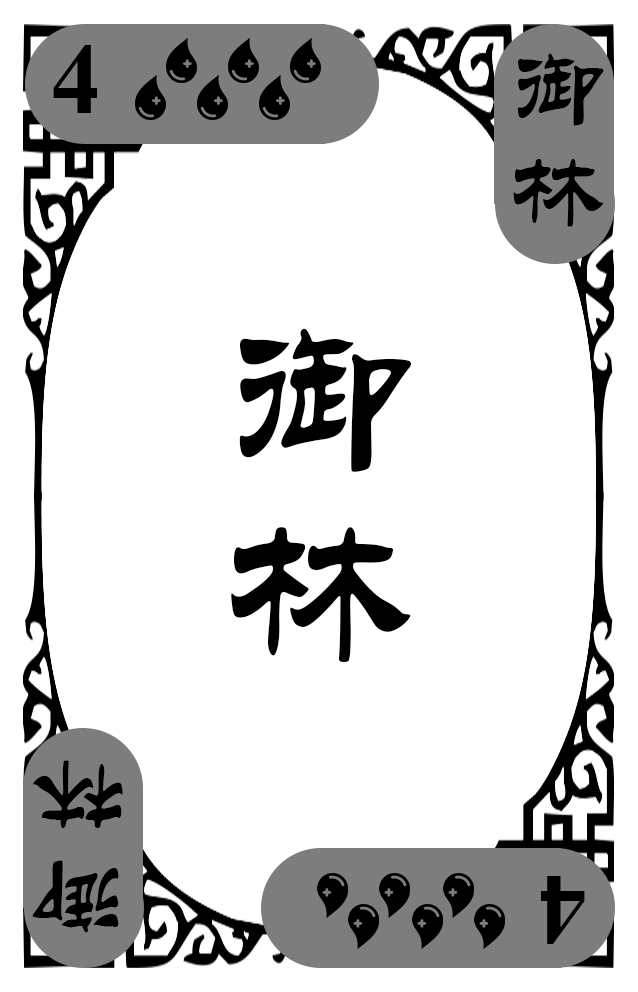
<style>
.page{position:relative;width:638px;height:992px;background:#ffffff}
.page>*{position:absolute;margin:0}
.t1{font:100px "TimesNewRomanPS-BoldMT";color:#000000}
.t2{font:100px "STLiti";color:#000000}
.t3{font:200px "STLiti";color:#000000}
</style>
<div class="page">
<p class="t1" style="left:53px;top:45px;width:44px;height:68px">4</p>
<p class="t2" style="left:513px;top:53px;width:91px;height:174px;text-align:center">御林</p>
<p class="t3" style="left:231px;top:328px;width:180px;height:334px">御林</p>
<p class="t2" style="left:32px;top:760px;width:91px;height:173px;rotate:180deg">御林</p>
<p class="t1" style="left:541px;top:876px;width:44px;height:68px;rotate:180deg">4</p>
</div>
